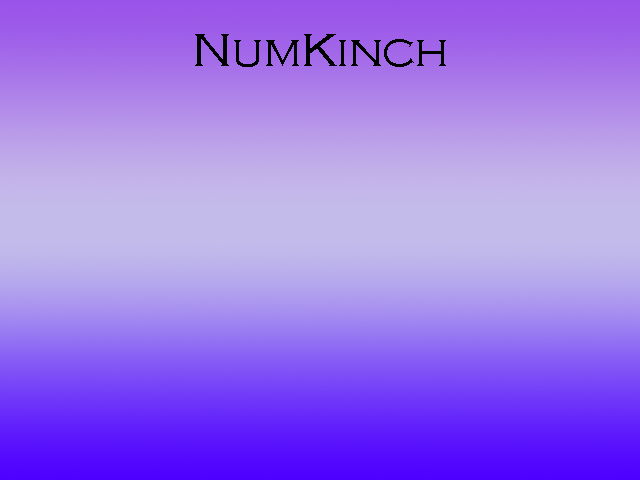
<style>
.page{position:relative;width:640px;height:480px}
.page>*{position:absolute;margin:0}
.t1{font:48px "CopperplateGothic-Light";color:#000000}
</style>
<div class="page">
<p class="t1" style="left:195px;top:34px;width:251px;height:33px">NumKinch</p>
</div>
